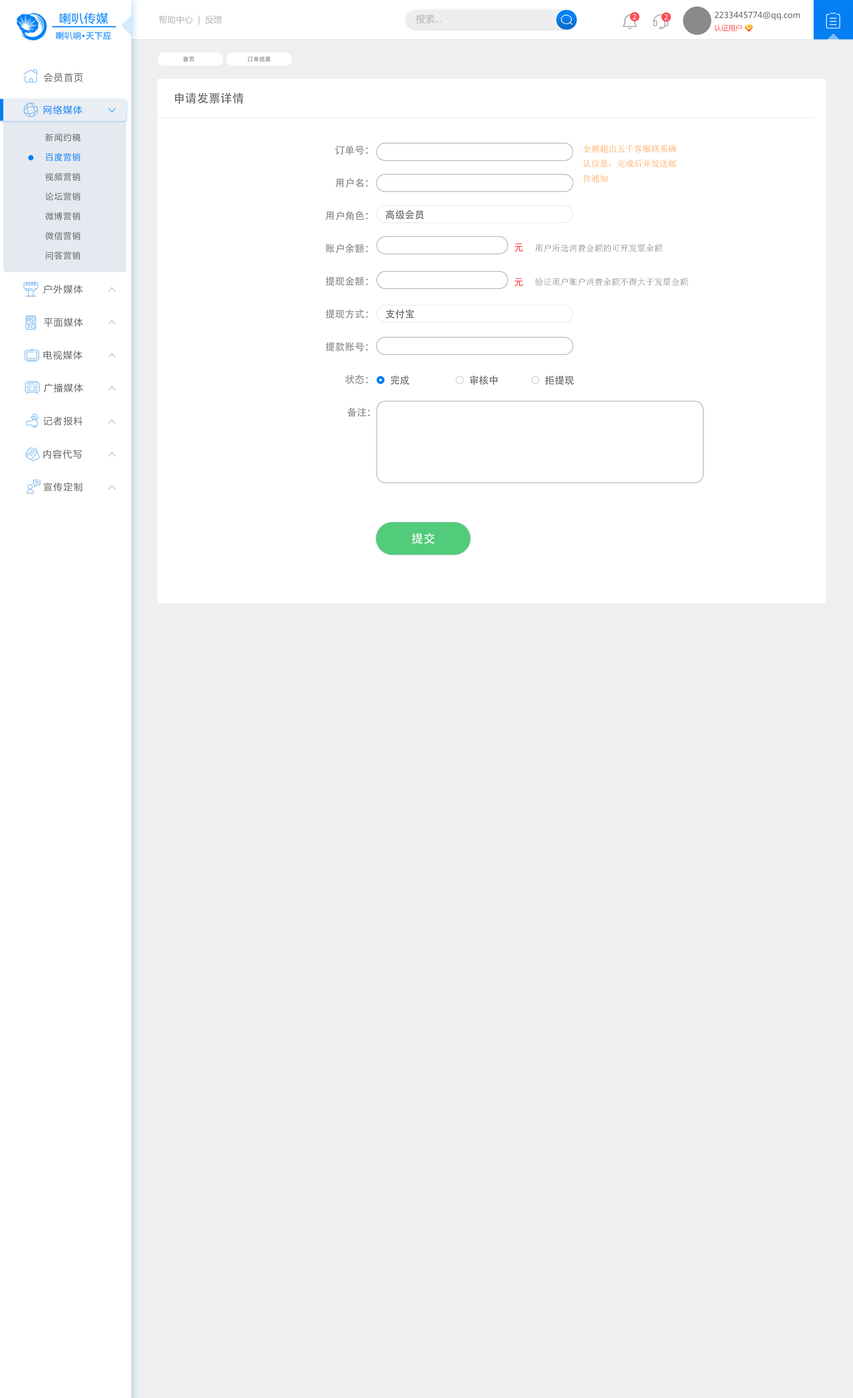
<style>
.page{position:relative;width:853px;height:1398px;background:#edeff0}
.page>*{position:absolute;margin:0}
.t1{font:8.6px "MicrosoftYaHei";color:#b4b4b4}
.t2{font:9.4px "MicrosoftYaHei";color:#b4b4b4}
.t3{font:6.9px "Tahoma";letter-spacing:0.1em;color:#ffffff;text-transform:uppercase}
.t4{font:8.2px/12.3px "MicrosoftYaHei";color:#5c6165}
.t5{font:7.1px/12.3px "MicrosoftYaHei";color:#fe4d55}
.t6{font:5.9px "AdobeHeitiStd-Regular";color:#878b8e}
.t7{font:9.2px "MicrosoftYaHei";letter-spacing:0.1em;color:#5c6165}
.t8{font:11.8px "AdobeHeitiStd-Regular";color:#5c6165}
.t9{font:9.2px "MicrosoftYaHei";letter-spacing:0.1em;color:#0582f5}
.t10{font:8.2px/19.7px "MicrosoftYaHei";letter-spacing:0.1em;color:#5c6165}
.t11{font:8.2px/19.7px "MicrosoftYaHei";letter-spacing:0.1em;color:#0381f5}
.t12{font:9.8px/32.8px "AdobeHeitiStd-Regular";color:#878b8e}
.t13{font:8.5px "SimSun";color:#ff9b3a}
.t14{font:9.8px "AdobeHeitiStd-Regular";color:#5c6165}
.t15{font:9.8px "AdobeHeitiStd-Regular";color:#fe4d55}
.t16{font:8.5px "SimSun";color:#878b8e}
.t17{font:9.8px "AdobeHeitiStd-Regular";color:#696969}
.t18{font:11.8px "AdobeHeitiStd-Regular";color:#fefefe}
</style>
<div class="page">
<p class="t1" style="left:159px;top:15px;width:63px;height:10px">帮助中心  |  反馈</p>
<p class="t2" style="left:416px;top:14px;width:25px;height:10px">搜索...</p>
<p class="t3" style="left:633px;top:14px;width:3px;height:5px">2</p>
<p class="t3" style="left:664px;top:14px;width:4px;height:6px">2</p>
<p class="t4" style="left:714px;top:11px;width:86px;height:20px">2233445774@qq.com<br><span class="t5">认证用户</span></p>
<p class="t6" style="left:183px;top:56px;width:11px;height:6px">首页</p>
<p class="t6" style="left:247px;top:56px;width:24px;height:6px">订单结算</p>
<p class="t7" style="left:44px;top:73px;width:39px;height:9px">会员首页</p>
<p class="t8" style="left:175px;top:92px;width:68px;height:12px">申请发票详情</p>
<p class="t9" style="left:44px;top:105px;width:38px;height:9px">网络媒体</p>
<p class="t10" style="left:45px;top:133px;width:35px;height:127px">新闻约稿<br><span class="t11">百度营销<br></span>视频营销<br>论坛营销<br>微博营销<br>微信营销<br>问答营销</p>
<p class="t12" style="left:325px;top:146px;width:45px;height:271px;text-align:right">订单号： <br>用户名： <br>用户角色： <br>账户余额： <br>提现金额： <br>提现方式： <br>提款账号： <br>状态： <br>备注：</p>
<p class="t13" style="left:583px;top:145px;width:93px;height:38px">金额超出五千客服联系确认信息，完成后并发送邮件通知</p>
<p class="t14" style="left:386px;top:210px;width:38px;height:9px">高级会员</p>
<p class="t15" style="left:514px;top:243px;width:9px;height:9px">元</p>
<p class="t16" style="left:535px;top:244px;width:127px;height:8px">用户所选消费金额的可开发票余额</p>
<p class="t15" style="left:514px;top:278px;width:9px;height:9px">元</p>
<p class="t16" style="left:535px;top:278px;width:153px;height:8px">验证用户账户消费余额不得大于发票金额</p>
<p class="t7" style="left:43px;top:285px;width:40px;height:9px">户外媒体</p>
<p class="t7" style="left:44px;top:318px;width:39px;height:9px">平面媒体</p>
<p class="t14" style="left:386px;top:310px;width:28px;height:9px">支付宝</p>
<p class="t7" style="left:43px;top:351px;width:39px;height:9px">电视媒体</p>
<p class="t17" style="left:391px;top:376px;width:18px;height:9px">完成</p>
<p class="t17" style="left:470px;top:376px;width:28px;height:9px">审核中</p>
<p class="t17" style="left:545px;top:376px;width:29px;height:9px">拒提现</p>
<p class="t7" style="left:44px;top:383px;width:39px;height:10px">广播媒体</p>
<p class="t7" style="left:43px;top:417px;width:40px;height:9px">记者报料</p>
<p class="t7" style="left:43px;top:450px;width:39px;height:9px">内容代写</p>
<p class="t7" style="left:43px;top:482px;width:39px;height:10px">宣传定制</p>
<p class="t18" style="left:412px;top:533px;width:22px;height:11px">提交</p>
</div>
